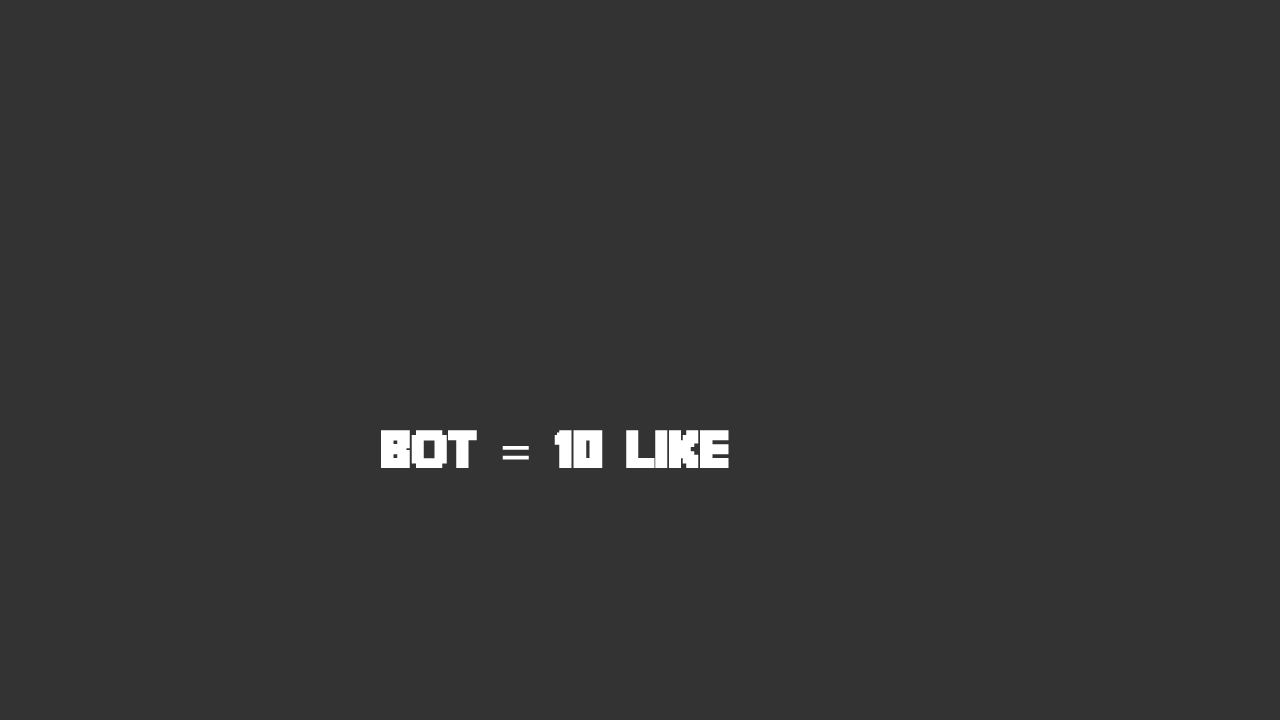
<style>
.page{position:relative;width:1280px;height:720px;background:#333333}
.page>*{position:absolute;margin:0}
.t1{font:48px "Minecrafter";letter-spacing:-0.04em;color:#ffffff}
.t2{font:48px "Tahoma";letter-spacing:-0.04em;color:#ffffff}
</style>
<div class="page">
<p class="t1" style="left:381px;top:430px;width:348px;height:38px">BOT <span class="t2">=</span> 10 LIKE</p>
</div>
